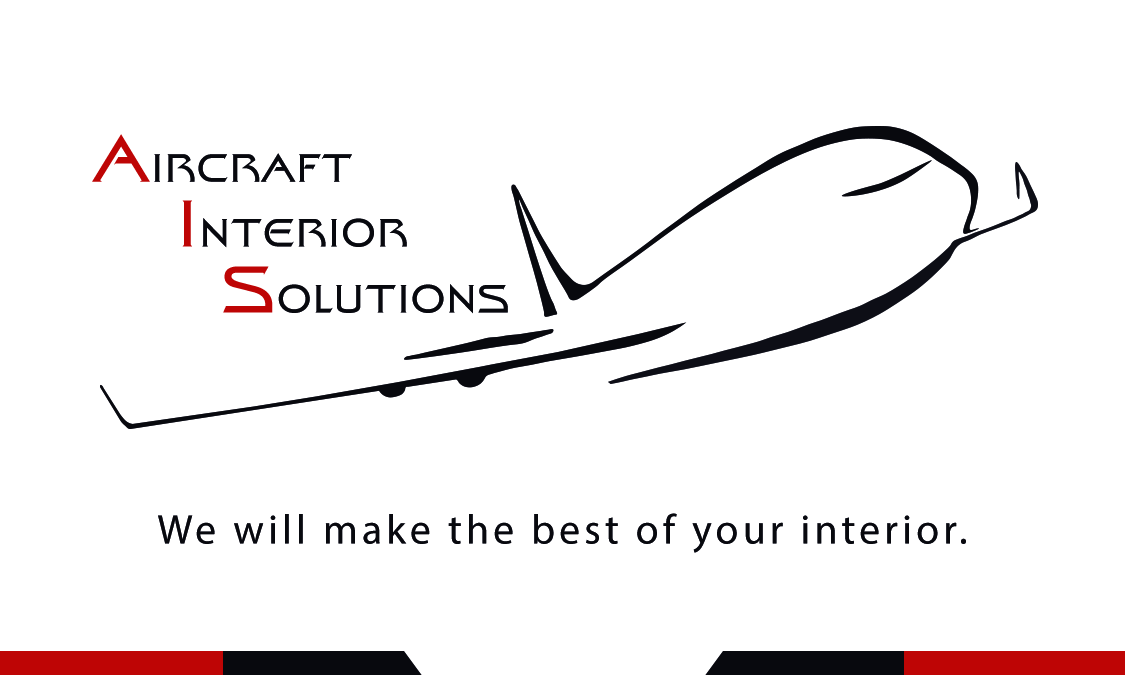
<style>
.page{position:relative;width:1125px;height:675px;background:#ffffff}
.page>*{position:absolute;margin:0}
.t1{font:39.8px "FinalFrontier";letter-spacing:0.04em;color:#08090e;text-transform:uppercase}
.t2{font:66.3px "FinalFrontier";letter-spacing:0.04em;color:#be0505;text-transform:uppercase}
.t3{font:41.7px "MyriadPro-Regular";letter-spacing:0.1em;color:#08090e}
.t4{font:41.7px "MyriadPro-Regular";letter-spacing:0.1em;color:#08090e;text-transform:uppercase}
</style>
<div class="page">
<p class="t1" style="left:92px;top:134px;width:260px;height:48px"><span class="t2">A</span>ircraft</p>
<p class="t1" style="left:182px;top:200px;width:225px;height:48px"><span class="t2">I</span>nterior</p>
<p class="t1" style="left:223px;top:266px;width:285px;height:48px"><span class="t2">S</span>olutions</p>
<p class="t3" style="left:158px;top:513px;width:808px;height:40px"><span class="t4">W</span>e will make the best of your interior.</p>
</div>
